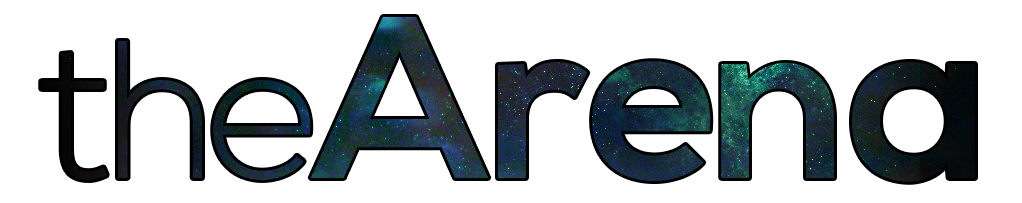
<style>
.page{position:relative;width:1022px;height:203px;background:#ffffff}
.page>*{position:absolute;margin:0}
.t1{font:195px "NexaLight";letter-spacing:-0.04em}
.t2{font:230px "NexaBold"}
.t3{font:230px "NexaBold";letter-spacing:-0.04em}
.t4{font:230px "NexaBold";letter-spacing:-0.001em}
.t5{font:230px "NexaBold";letter-spacing:-0.02em}
</style>
<div class="page">
<p class="t1" style="left:41px;top:17px;width:934px;height:165px">the<span class="t2">Ar</span><span class="t3">e</span><span class="t4">n</span><span class="t5">a</span></p>
</div>
